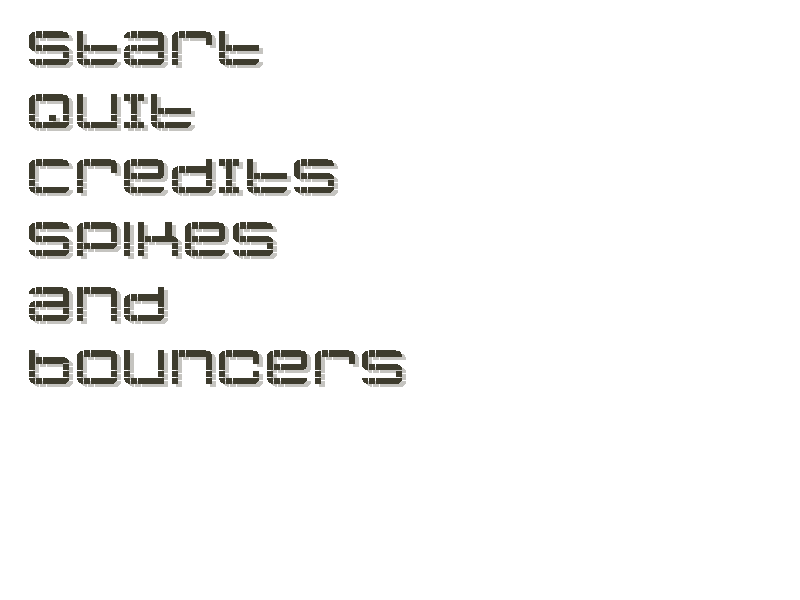
<style>
.page{position:relative;width:800px;height:600px;background:#ffffff}
.page>*{position:absolute;margin:0}
.t1{font:66.7px "JethosePIXEL";color:#3e3c2e}
.t2{font:66.7px "JethosePIXEL"}
</style>
<div class="page">
<p class="t1" style="left:29px;top:31px;width:230px;height:34px">START</p>
<p class="t2" style="left:33px;top:34px;width:230px;height:34px">START</p>
<p class="t1" style="left:29px;top:94px;width:162px;height:34px">QUIT</p>
<p class="t1" style="left:29px;top:159px;width:305px;height:34px">CREDITS</p>
<p class="t2" style="left:33px;top:162px;width:305px;height:34px">CREDITS</p>
<p class="t1" style="left:29px;top:222px;width:244px;height:34px">Spikes</p>
<p class="t1" style="left:29px;top:287px;width:135px;height:34px">and</p>
<p class="t1" style="left:29px;top:350px;width:373px;height:34px">Bouncers</p>
<p class="t2" style="left:33px;top:353px;width:373px;height:34px">Bouncers</p>
</div>
